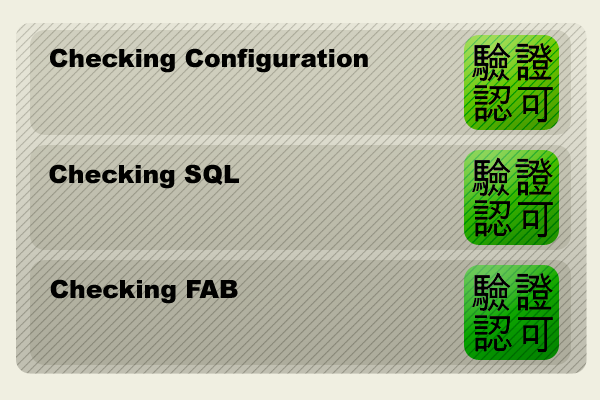
<style>
.page{position:relative;width:600px;height:400px}
.page>*{position:absolute;margin:0}
.t1{font:25px "Arial-Black";color:#010100}
</style>
<div class="page">
<p class="t1" style="left:50px;top:48px;width:318px;height:25px">Checking Configuration</p>
<p class="t1" style="left:49px;top:164px;width:190px;height:25px">Checking SQL</p>
<p class="t1" style="left:50px;top:279px;width:188px;height:25px">Checking FAB</p>
</div>
